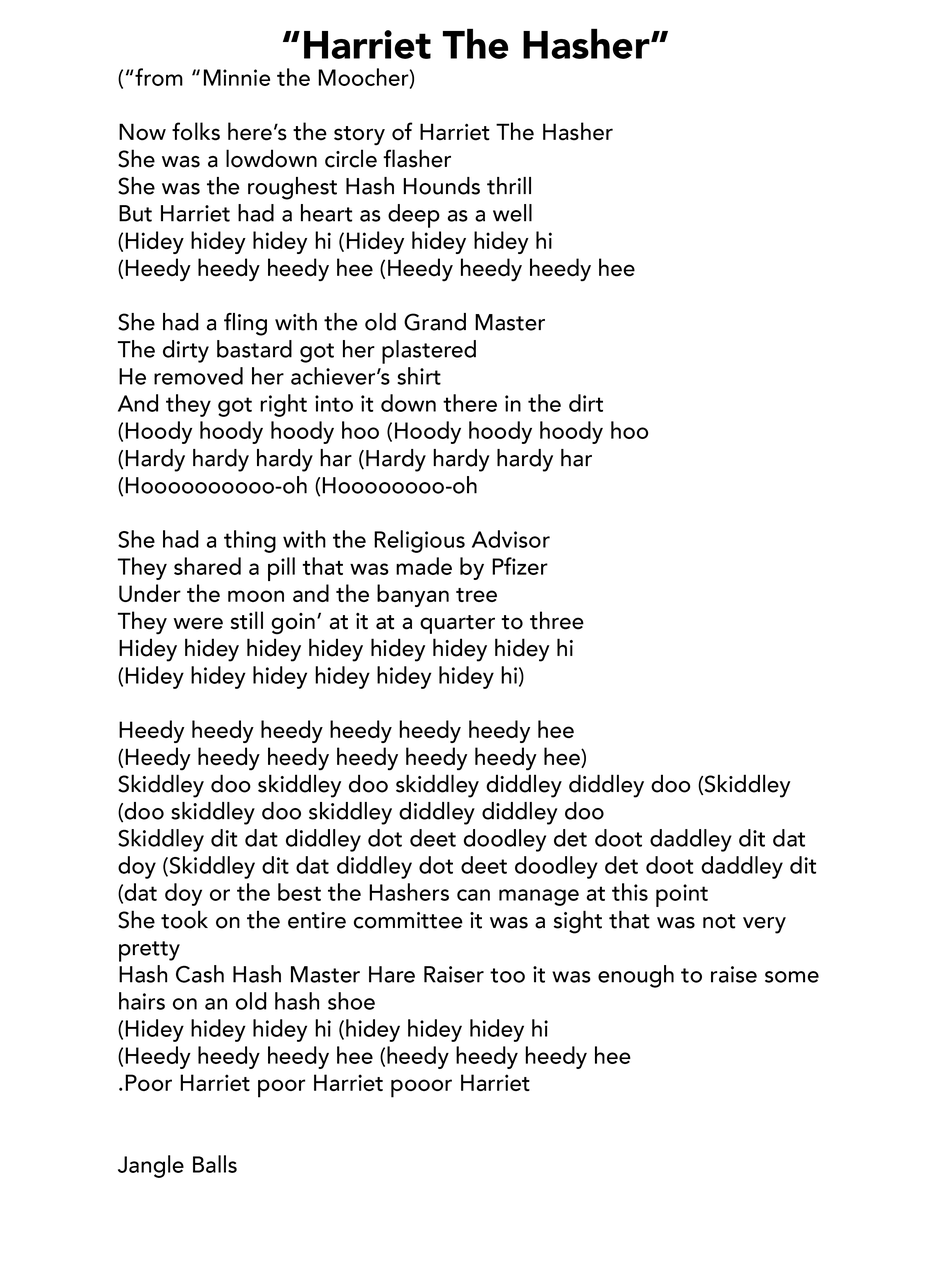
<style>
.page{position:relative;width:931px;height:1281px;background:#ffffff}
.page>*{position:absolute;margin:0}
.t1{font:22.6px "Avenir-Medium";color:#000000}
.t2{font:38.8px "Avenir-Black";color:#000000}
</style>
<div class="page">
<p class="t1" style="left:118px;top:29px;width:701px;height:1148px;text-align:center"><span class="t2">“Harriet The Hasher”<br></span>(from “Minnie the Moocher”)<br><br>Now folks here’s the story of Harriet The Hasher<br>She was a lowdown circle flasher<br>She was the roughest Hash Hounds thrill<br>But Harriet had a heart as deep as a well<br>Hidey hidey hidey hi (Hidey hidey hidey hi)<br>Heedy heedy heedy hee (Heedy heedy heedy hee)<br><br>She had a fling with the old Grand Master<br>The dirty bastard got her plastered<br>He removed her achiever’s shirt<br>And they got right into it down there in the dirt<br>Hoody hoody hoody hoo (Hoody hoody hoody hoo)<br>Hardy hardy hardy har (Hardy hardy hardy har)<br>Hoooooooooo-oh (Hoooooooo-oh)<br><br>She had a thing with the Religious Advisor <br>They shared a pill that was made by Pfizer<br>Under the moon and the banyan tree<br>They were still goin’ at it at a quarter to three<br>Hidey hidey hidey hidey hidey hidey hidey hi<br>(Hidey hidey hidey hidey hidey hidey hi)<br><br>Heedy heedy heedy heedy heedy heedy hee<br>(Heedy heedy heedy heedy heedy heedy hee)<br>Skiddley doo skiddley doo skiddley diddley diddley doo (Skiddley doo skiddley doo skiddley diddley diddley doo)<br>Skiddley dit dat diddley dot deet doodley det doot daddley dit dat doy (Skiddley dit dat diddley dot deet doodley det doot daddley dit dat doy or the best the Hashers can manage at this point)<br>She took on the entire committee it was a sight that was not very pretty<br>Hash Cash Hash Master Hare Raiser too it was enough to raise some hairs on an old hash shoe<br>Hidey hidey hidey hi (hidey hidey hidey hi)<br>Heedy heedy heedy hee (heedy heedy heedy hee)<br>Poor Harriet poor Harriet pooor Harriet.<br><br><br>Jangle Balls</p>
</div>
